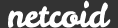
<style>
.page{position:relative;width:118px;height:28px;background:#333333}
.page>*{position:absolute;margin:0}
.t1{font:33px "LeckerliOne";color:#ffffff}
</style>
<div class="page">
<p class="t1" style="left:8px;top:0px;width:103px;height:28px">netcoid</p>
</div>
